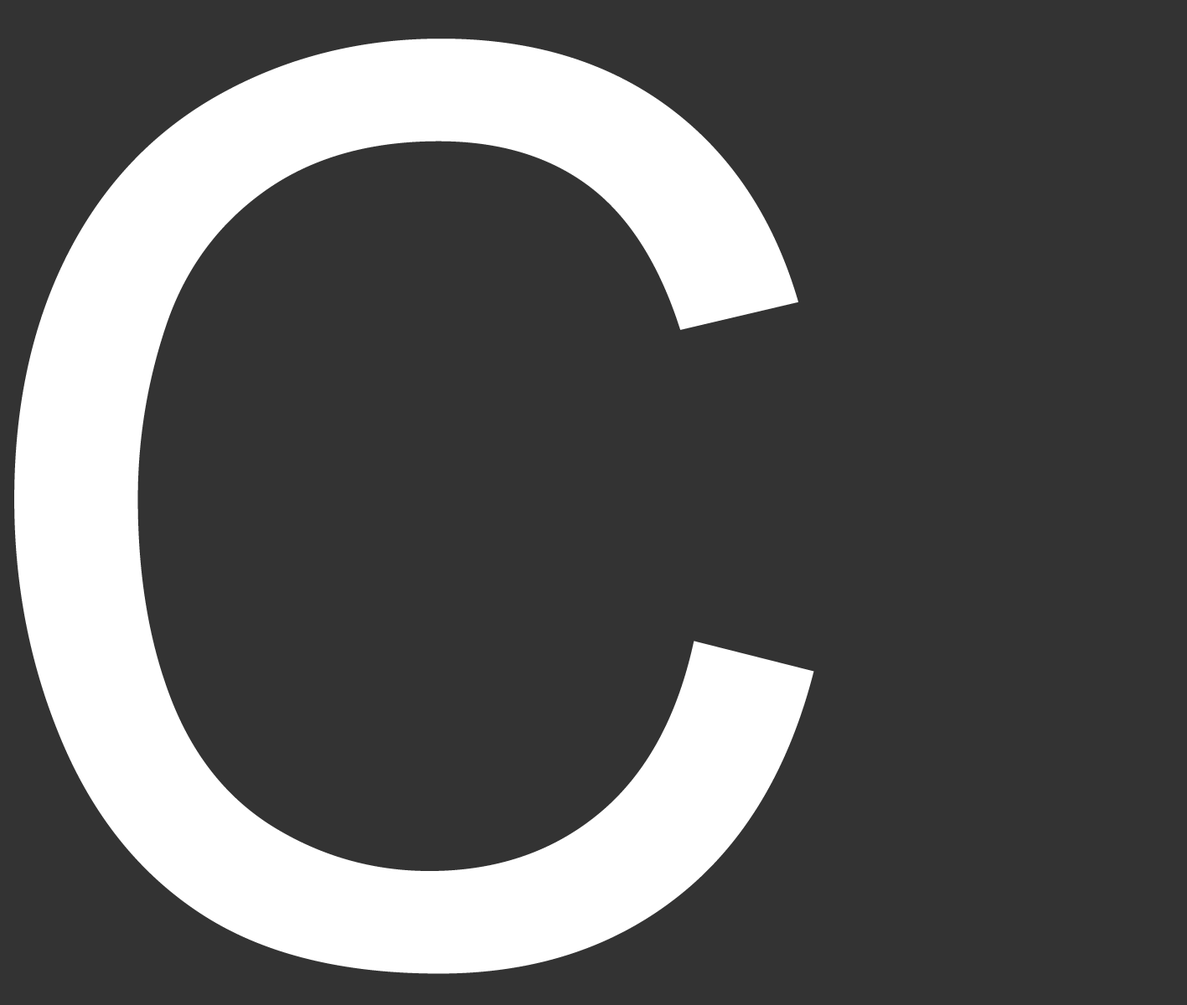
<style>
.page{position:relative;width:1187px;height:1005px;background:#333333}
.page>*{position:absolute;margin:0}
.t1{font:1262.6px "ArialMT";color:#ffffff}
</style>
<div class="page">
<p class="t1" style="left:14px;top:39px;width:800px;height:935px">C</p>
</div>
